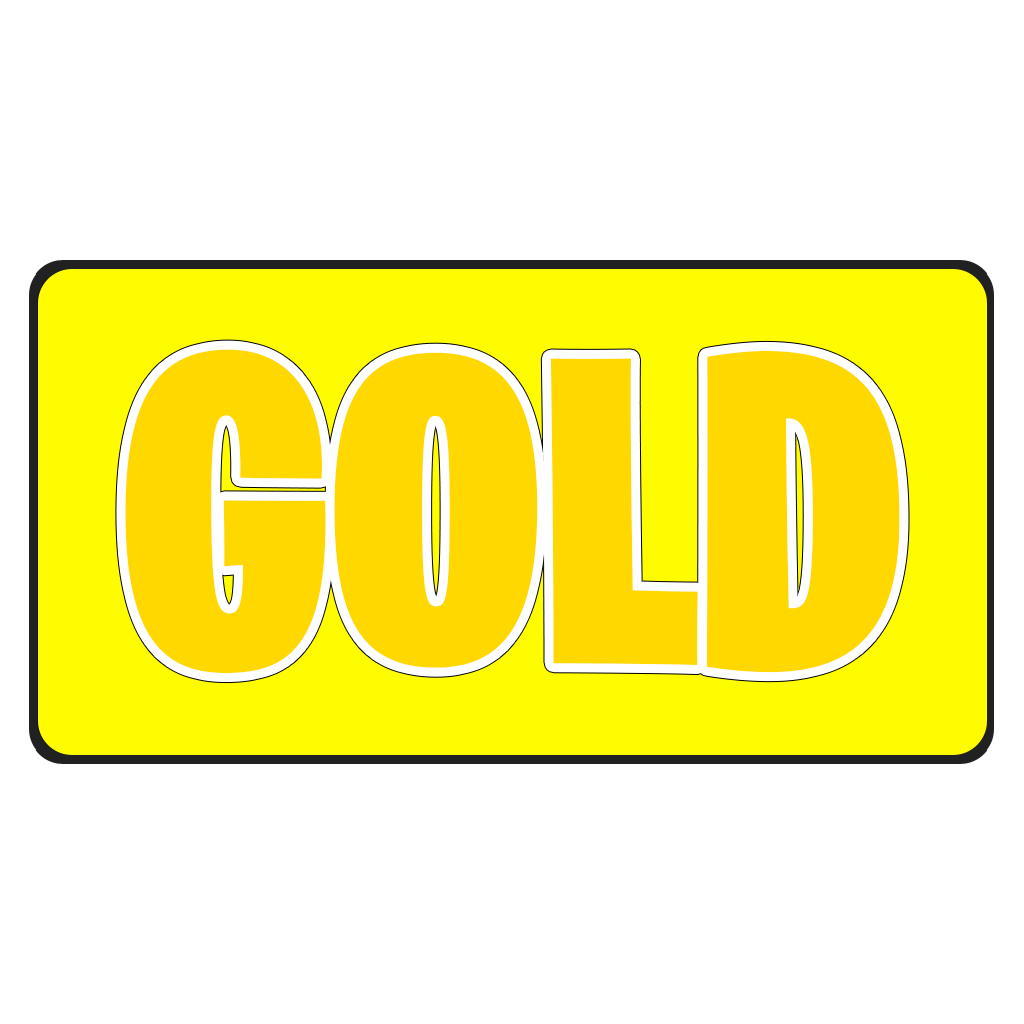
<style>
.page{position:relative;width:1024px;height:1024px;background:#ffffff}
.page>*{position:absolute;margin:0}
.t1{font:444.8px "BurbankBigCondensed-Black";color:#ffd800}
</style>
<div class="page">
<p class="t1" style="left:125px;top:349px;width:775px;height:325px">GOLD</p>
</div>
